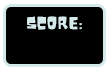
<style>
.page{position:relative;width:110px;height:70px;background:#000000}
.page>*{position:absolute;margin:0}
.t1{font:16.7px "Noot";color:#d5e9ea}
</style>
<div class="page">
<p class="t1" style="left:27px;top:16px;width:55px;height:14px">:SCORE</p>
</div>
